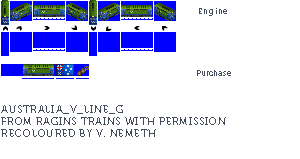
<style>
.page{position:relative;width:300px;height:159px;background:#ffffff}
.page>*{position:absolute;margin:0}
.t1{font:8px "Museo700-Regular";letter-spacing:0.075em;color:#444c5c}
.t2{font:8px "Museo700-Regular";color:#444c5c}
.t3{font:10px "Museo700-Regular";letter-spacing:0.075em;color:#444c5c;text-transform:uppercase}
</style>
<div class="page">
<p class="t1" style="left:199px;top:8px;width:28px;height:8px">Engine</p>
<p class="t2" style="left:197px;top:70px;width:34px;height:6px">Purchase</p>
<p class="t3" style="left:1px;top:105px;width:225px;height:32px">Australia_V_Line_G<br>from ragins trains with permission<br>RECOLOURED BY v. nemeth</p>
</div>
